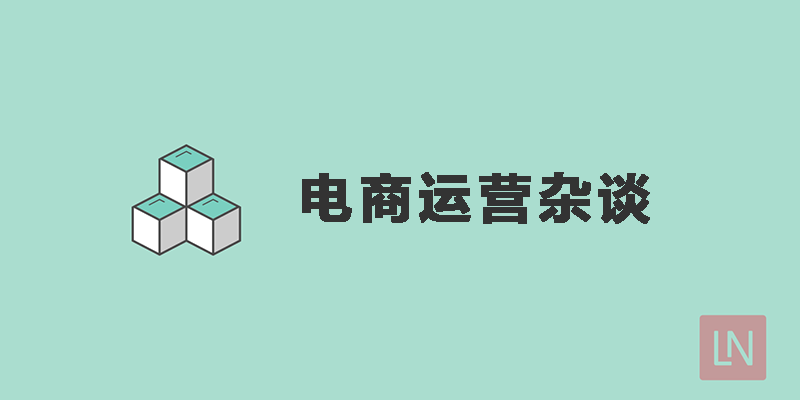
<style>
.page{position:relative;width:800px;height:400px;background:#aaddcf}
.page>*{position:absolute;margin:0}
.t1{font:52px "MicrosoftYaHei-Bold";letter-spacing:0.12em;color:#333333;font-weight:bold}
</style>
<div class="page">
<p class="t1" style="left:302px;top:172px;width:348px;height:52px">电商运营杂谈</p>
</div>
